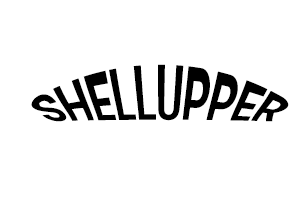
<style>
.page{position:relative;width:300px;height:200px;background:#ffffff}
.page>*{position:absolute;margin:0}
.t1{font:36px "Roboto-Bold";color:#000000}
</style>
<div class="page">
<p class="t1" style="left:31px;top:64px;width:258px;height:58px">SHELLUPPER</p>
</div>
